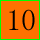
<style>
.page{position:relative;width:40px;height:40px;background:#ff7200}
.page>*{position:absolute;margin:0}
.t1{font:30px "SimSun";color:#000000}
</style>
<div class="page">
<p class="t1" style="left:9px;top:9px;width:26px;height:22px">10</p>
</div>
